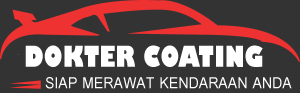
<style>
.page{position:relative;width:300px;height:93px;background:#333333}
.page>*{position:absolute;margin:0}
.t1{font:28.3px "GillSans-UltraBold";letter-spacing:0.01em;color:#ffffff;scale:0.78 1}
.t2{font:23.4px "CordiaNew-Bold";letter-spacing:0.01em;color:#ffffff;scale:0.9 1}
</style>
<div class="page">
<p class="t1" style="left:25px;top:45px;width:238px;height:22px">DOKTER COATING</p>
<p class="t2" style="left:45px;top:77px;width:247px;height:12px">SIAP MERAWAT KENDARAAN ANDA</p>
</div>
